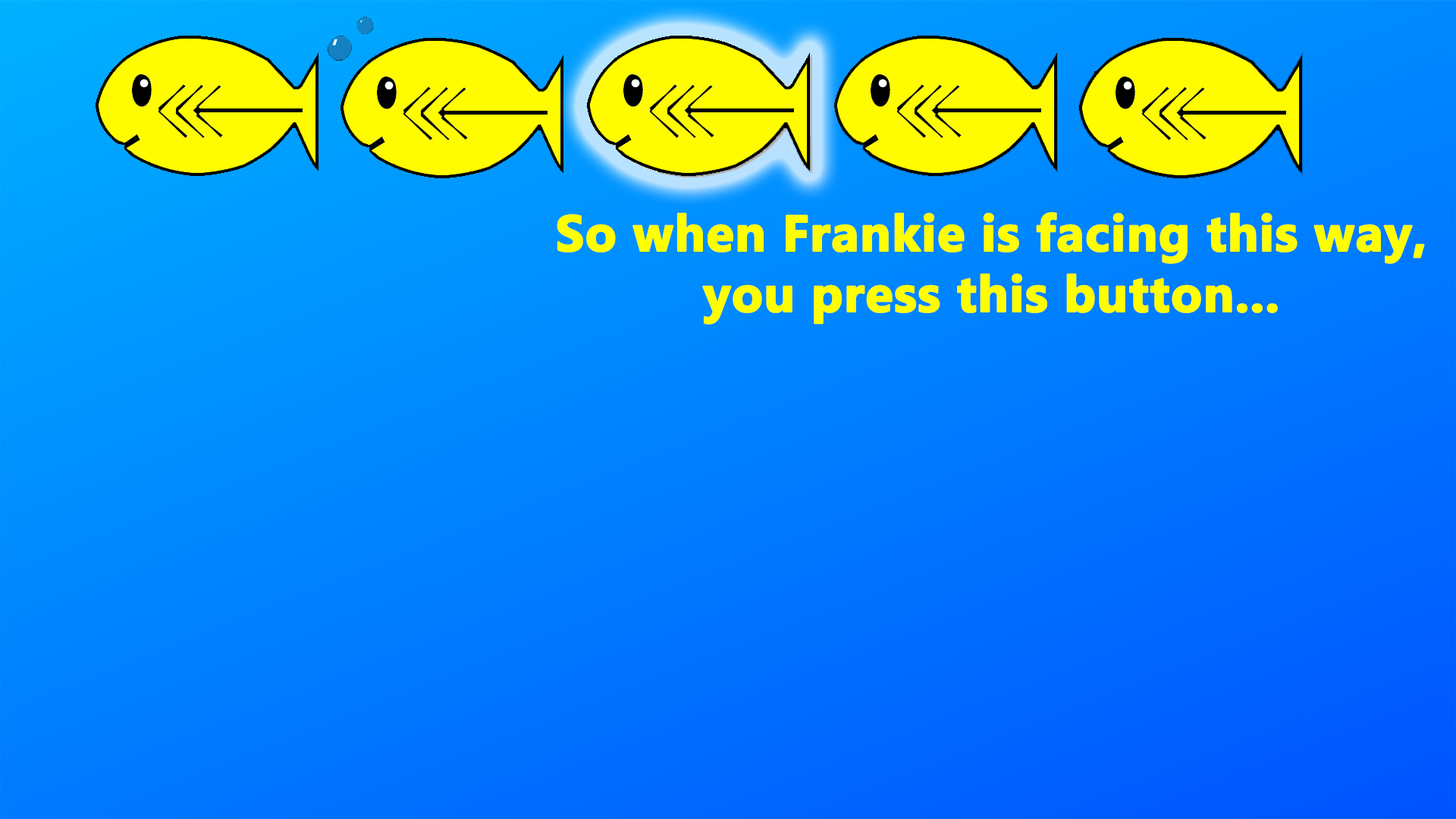
<style>
.page{position:relative;width:1456px;height:819px}
.page>*{position:absolute;margin:0}
.t1{font:50.6px "MyanmarText-Bold";color:#ffff00;font-weight:bold}
</style>
<div class="page">
<p class="t1" style="left:557px;top:212px;width:868px;height:113px;text-align:center">So when Frankie is facing this way,<br>you press this button...</p>
</div>
